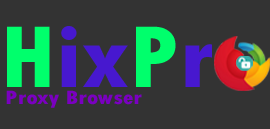
<style>
.page{position:relative;width:270px;height:129px;background:#333333}
.page>*{position:absolute;margin:0}
.t1{font:92.5px "TwCenMT-CondensedExtraBold";color:#4718cf;scale:1.08 1}
.t2{font:92.5px "TwCenMT-CondensedExtraBold";color:#00ff6c;scale:1.08 1}
.t3{font:20.6px "TwCenMT-CondensedExtraBold";color:#7a00c0;scale:1.21 1}
</style>
<div class="page">
<p class="t1" style="left:7px;top:26px;width:205px;height:61px"><span class="t2">H</span>ix<span class="t2">P</span>r</p>
<p class="t3" style="left:6px;top:90px;width:136px;height:18px">Proxy Browser</p>
</div>
